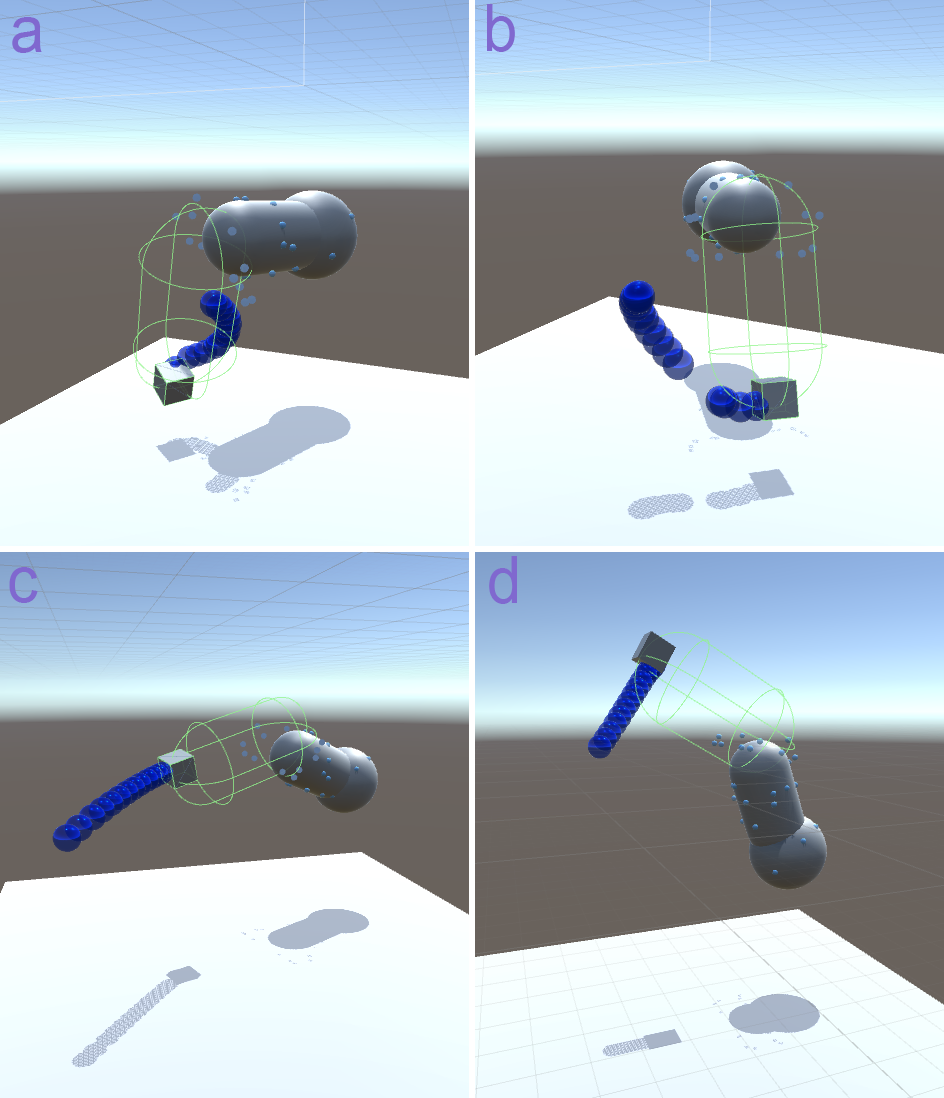
<style>
.page{position:relative;width:944px;height:1098px}
.page>*{position:absolute;margin:0}
.t1{font:65.3px "ArialMT";color:#8068cf;scale:0.95 1}
</style>
<div class="page">
<p class="t1" style="left:487px;top:4px;width:28px;height:48px">b</p>
<p class="t1" style="left:12px;top:17px;width:30px;height:36px">a</p>
<p class="t1" style="left:489px;top:556px;width:28px;height:48px">d</p>
<p class="t1" style="left:9px;top:567px;width:29px;height:36px">c</p>
</div>
